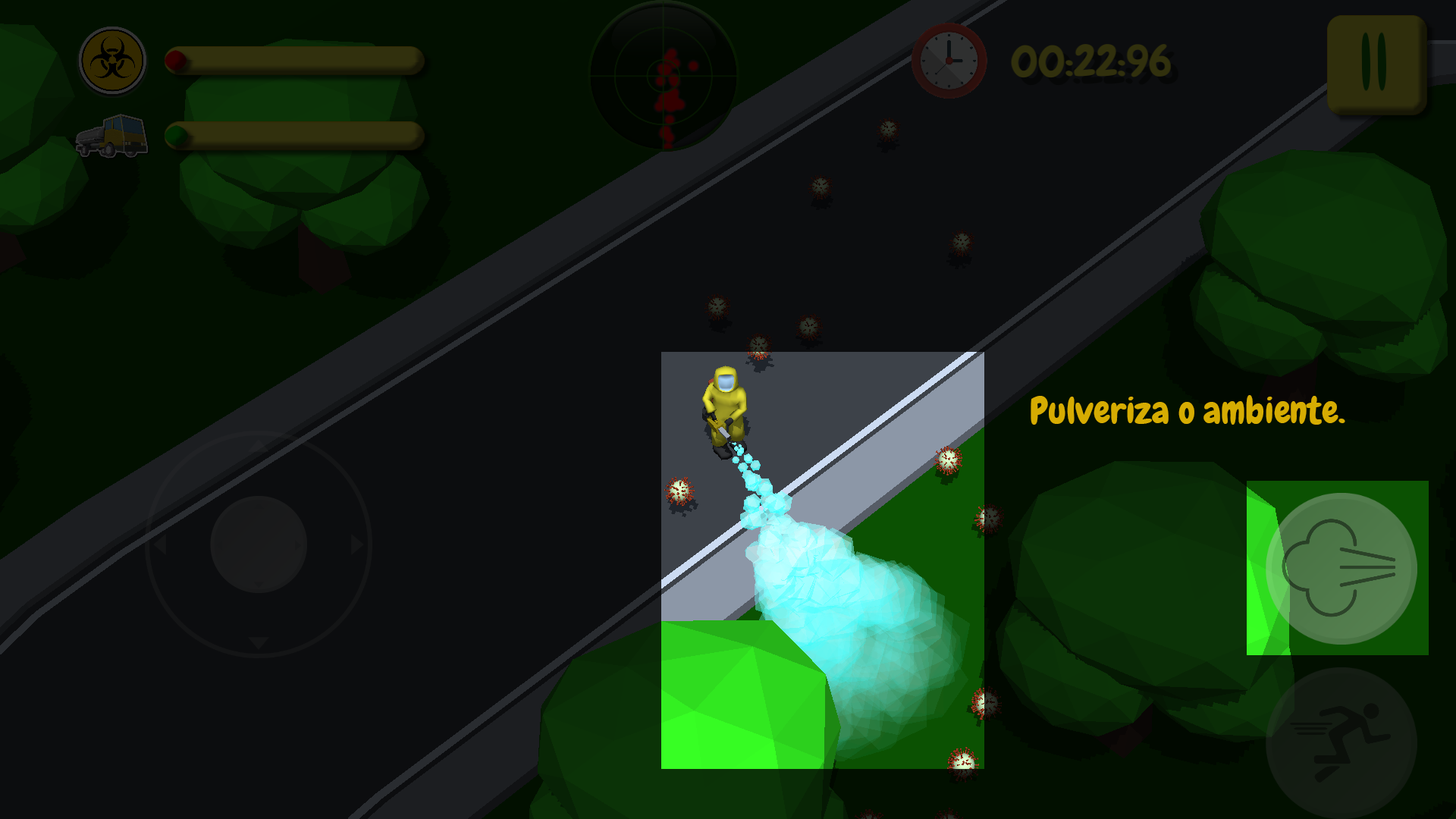
<style>
.page{position:relative;width:1456px;height:819px;background:#0c0d0f}
.page>*{position:absolute;margin:0}
.t1{font:37.1px "Chewy-Regular";color:#d6ac02}
</style>
<div class="page">
<p class="t1" style="left:1031px;top:395px;width:314px;height:30px">Pulveriza o ambiente.</p>
</div>
